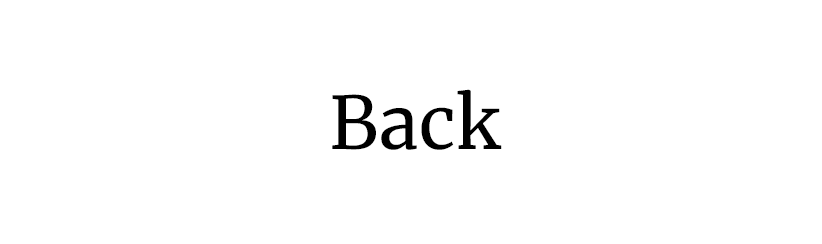
<style>
.page{position:relative;width:822px;height:244px;background:#ffffff}
.page>*{position:absolute;margin:0}
.t1{font:72.5px "Merriweather-Regular";color:#000000}
</style>
<div class="page">
<p class="t1" style="left:332px;top:89px;width:170px;height:61px">Back</p>
</div>
